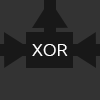
<style>
.page{position:relative;width:100px;height:100px;background:#333333}
.page>*{position:absolute;margin:0}
.t1{font:18px "Ubuntu-Light";color:#ffffff}
</style>
<div class="page">
<p class="t1" style="left:32px;top:44px;width:36px;height:12px">XOR</p>
</div>
